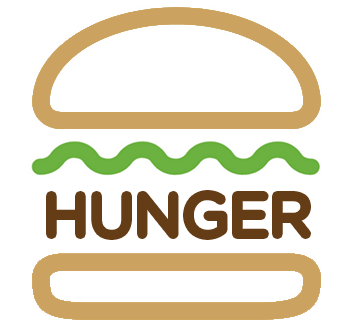
<style>
.page{position:relative;width:350px;height:320px;background:#ffffff}
.page>*{position:absolute;margin:0}
.t1{font:60px "GothamRounded-Book";color:#643c16}
</style>
<div class="page">
<p class="t1" style="left:49px;top:193px;width:259px;height:44px">HUNGER</p>
</div>
